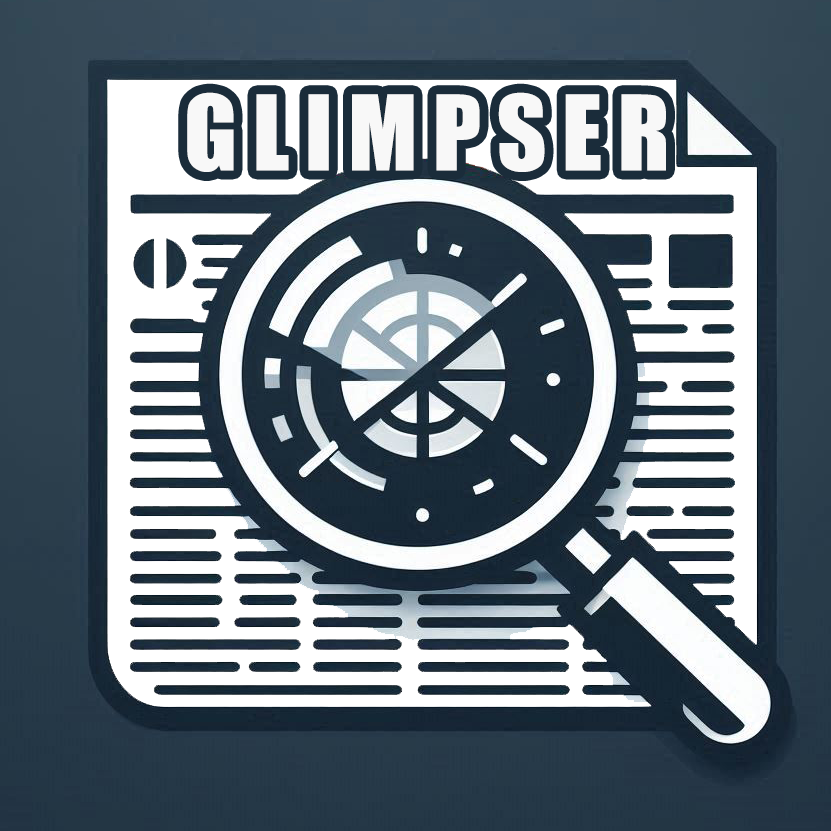
<style>
.page{position:relative;width:831px;height:831px}
.page>*{position:absolute;margin:0}
.t1{font:96px "Impact";letter-spacing:0.16em;color:#f8f8f8}
</style>
<div class="page">
<p class="t1" style="left:187px;top:92px;width:479px;height:80px">GLIMPSER</p>
</div>
